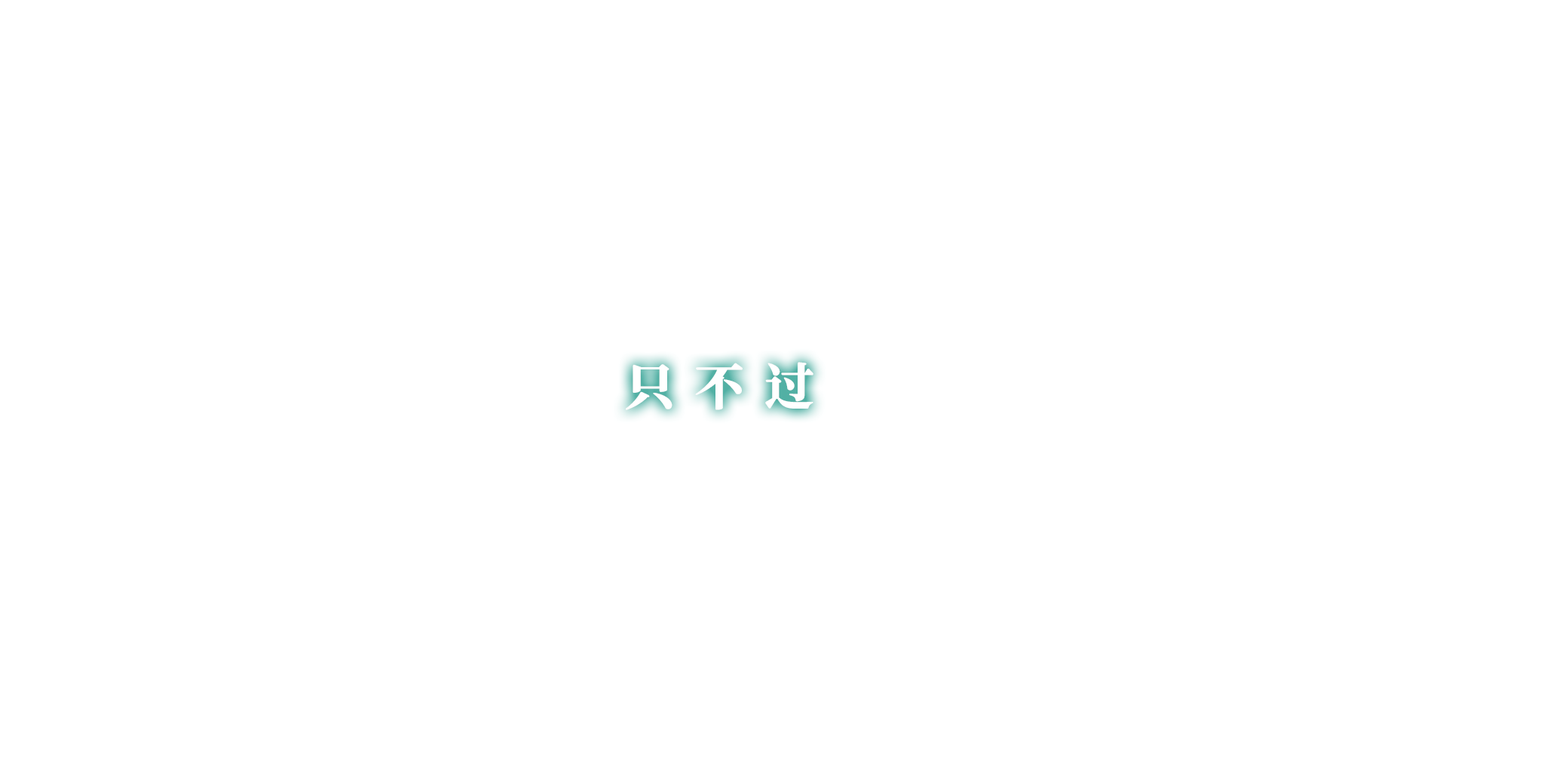
<style>
.page{position:relative;width:1544px;height:772px;background:#ffffff}
.page>*{position:absolute;margin:0}
.t1{font:49.8px "ChillJinshuSongHeavy";letter-spacing:0.4em;color:#ffffff}
</style>
<div class="page">
<p class="t1" style="left:626px;top:362px;width:188px;height:48px">只不过</p>
</div>
